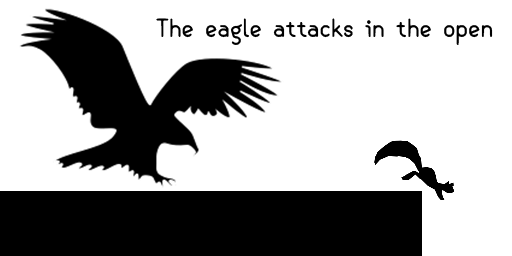
<style>
.page{position:relative;width:512px;height:256px;background:#ffffff}
.page>*{position:absolute;margin:0}
.t1{font:24px "SemiCasual";color:#000000}
</style>
<div class="page">
<p class="t1" style="left:156px;top:18px;width:337px;height:27px">The eagle attacks in the open</p>
</div>
